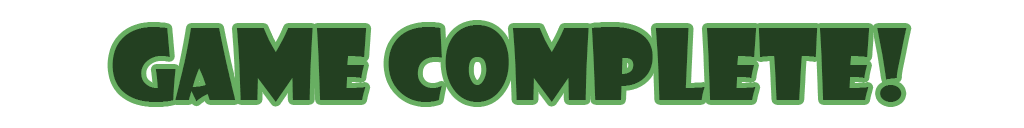
<style>
.page{position:relative;width:1024px;height:128px;background:#ffffff}
.page>*{position:absolute;margin:0}
.t1{font:96px "ShowcardGothic-Reg";color:#234021}
</style>
<div class="page">
<p class="t1" style="left:112px;top:25px;width:795px;height:77px">GAME COMPLETE!</p>
</div>
